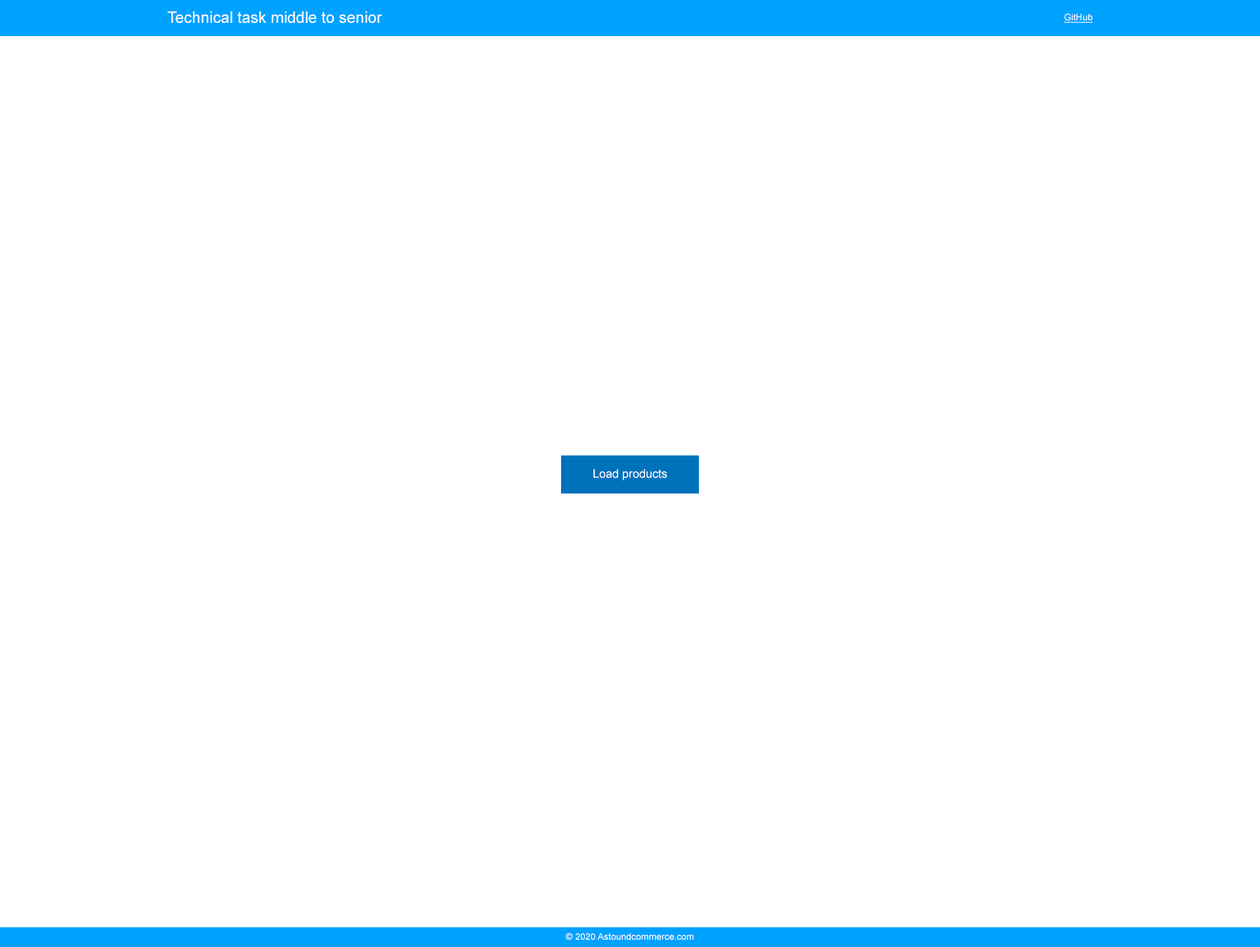
<style>
.page{position:relative;width:1260px;height:947px;background:#ffffff}
.page>*{position:absolute;margin:0}
.t1{font:15.7px "ArialMT";color:#ffffff}
.t2{font:9.2px "ArialMT";color:#ffffff;text-decoration:underline}
.t3{font:11.8px "ArialMT";color:#ffffff}
.t4{font:9.2px "ArialMT";color:#ffffff}
</style>
<div class="page">
<p class="t1" style="left:167px;top:11px;width:215px;height:12px">Technical task middle to senior</p>
<p class="t2" style="left:1063px;top:13px;width:29px;height:10px">GitHub</p>
<p class="t3" style="left:593px;top:469px;width:74px;height:11px">Load products</p>
<p class="t4" style="left:566px;top:932px;width:127px;height:7px">© 2020 Astoundcommerce.com</p>
</div>
